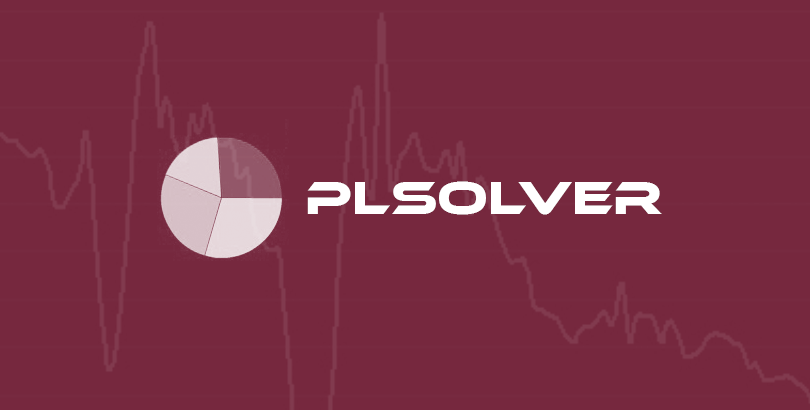
<style>
.page{position:relative;width:810px;height:410px;background:#76283e}
.page>*{position:absolute;margin:0}
.t1{font:48px "EthnocentricRg-Regular";color:#ffffff}
</style>
<div class="page">
<p class="t1" style="left:307px;top:181px;width:355px;height:34px">PLSolver</p>
</div>
